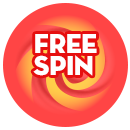
<style>
.page{position:relative;width:130px;height:130px;background:#ffffff}
.page>*{position:absolute;margin:0}
.t1{font:28px/22px "NeutraDisp-Titling";letter-spacing:-0.025em;color:#ffffff;text-transform:uppercase}
</style>
<div class="page">
<p class="t1" style="left:33px;top:34px;width:64px;height:42px">Free <br>Spin</p>
</div>
